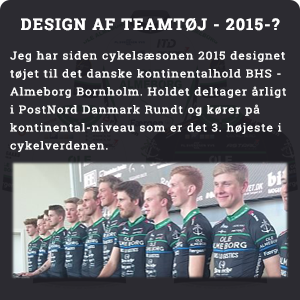
<style>
.page{position:relative;width:300px;height:300px;background:#2c2b31}
.page>*{position:absolute;margin:0}
.t1{font:16px "RobotoSlab-Bold";letter-spacing:0.075em;color:#ffffff}
.t2{font:11.1px/18px "RobotoSlab-Regular";letter-spacing:0.075em;color:#ffffff;scale:1.08 1}
</style>
<div class="page">
<p class="t1" style="left:21px;top:18px;width:259px;height:13px">DESIGN AF TEAMTØJ - 2015-?</p>
<p class="t2" style="left:10px;top:51px;width:276px;height:101px">Jeg har siden cykelsæsonen 2015 designet tøjet til det danske kontinentalhold BHS - Almeborg Bornholm. Holdet deltager årligt i PostNord Danmark Rundt og kører på kontinental-niveau som er det 3. højeste i cykelverdenen.</p>
</div>
